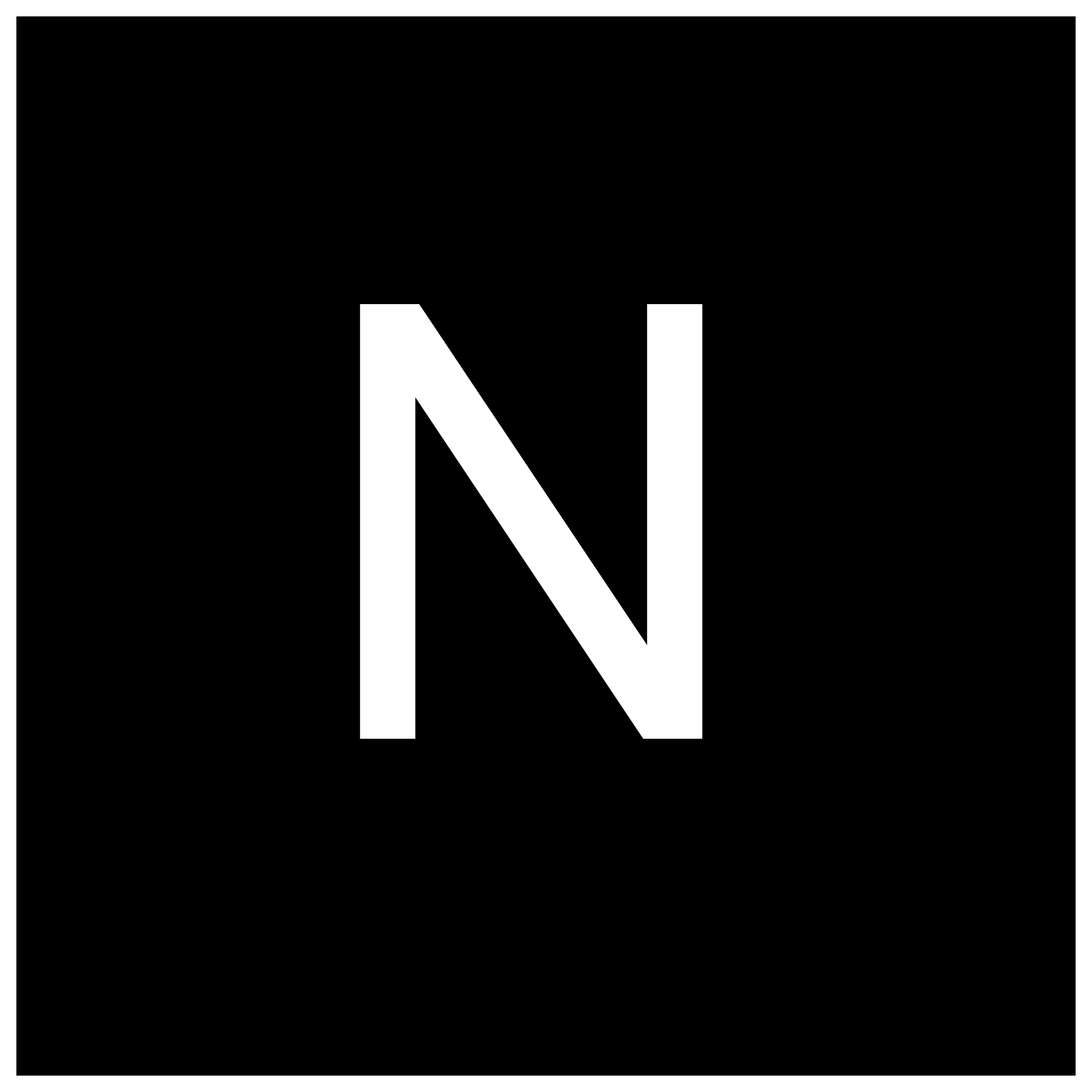
<style>
.page{position:relative;width:1092px;height:1092px;background:#000000}
.page>*{position:absolute;margin:0}
.t1{font:606.7px "ArialMT";color:#ffffff}
</style>
<div class="page">
<p class="t1" style="left:360px;top:304px;width:343px;height:435px">N</p>
</div>
